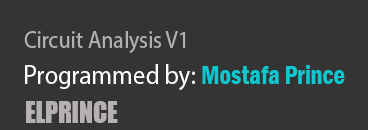
<style>
.page{position:relative;width:368px;height:130px;background:#353434}
.page>*{position:absolute;margin:0}
.t1{font:24px "MyriadPro-Regular";color:#b6b1b1;scale:0.92 1}
.t2{font:27px "MyriadPro-Regular";color:#ffffff;scale:0.92 1}
.t3{font:27px "FranklinGothic-DemiCond";color:#0dc8cf;scale:0.92 1}
.t4{font:27.8px "Impact";color:#b6b1b1;scale:0.92 1}
</style>
<div class="page">
<p class="t1" style="left:24px;top:31px;width:162px;height:22px">Circuit Analysis V1</p>
<p class="t2" style="left:25px;top:64px;width:320px;height:26px">Programmed by: <span class="t3">Mostafa Prince</span></p>
<p class="t4" style="left:26px;top:101px;width:92px;height:22px">ELPRINCE</p>
</div>
